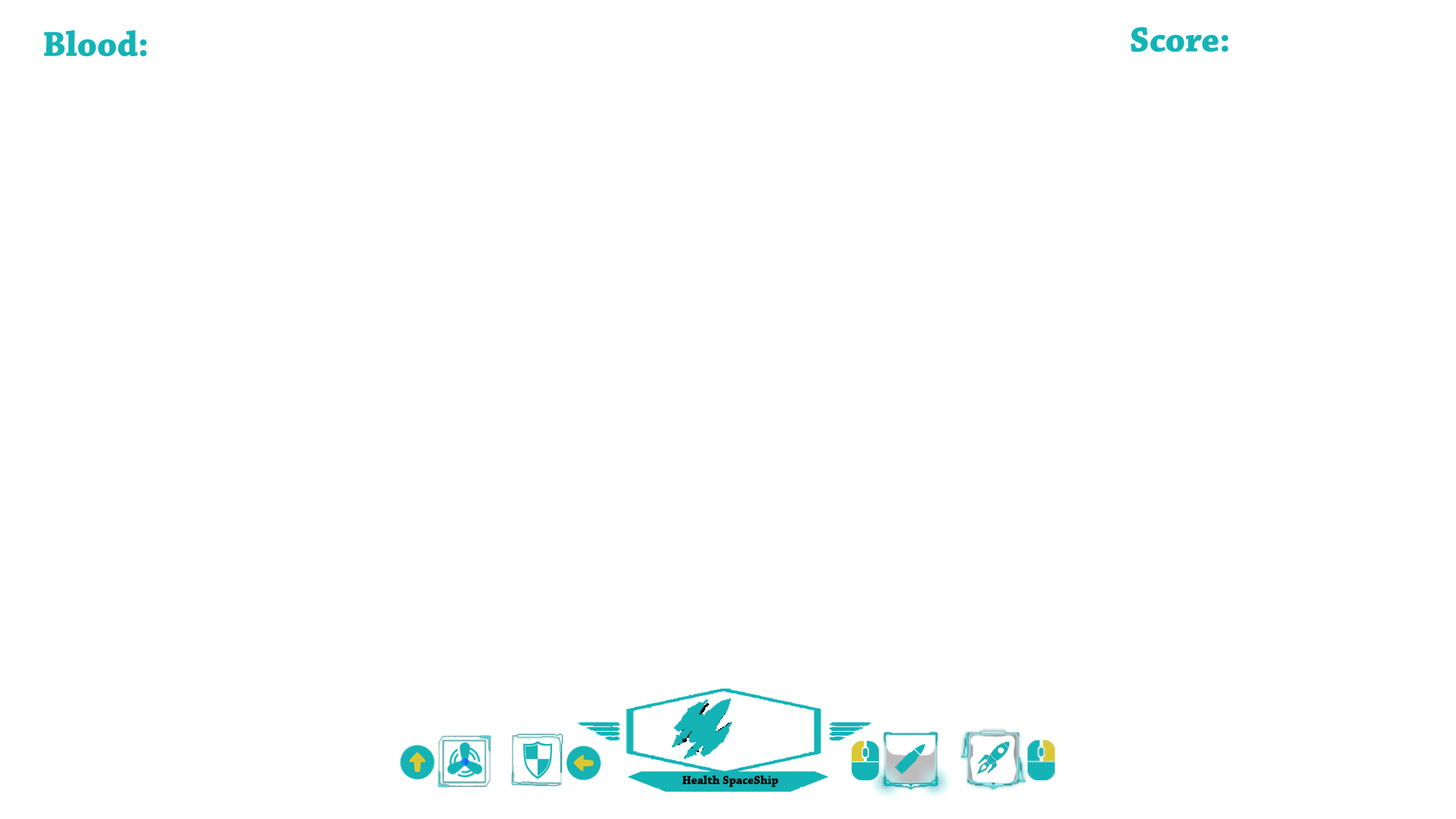
<style>
.page{position:relative;width:1456px;height:819px;background:#ffffff}
.page>*{position:absolute;margin:0}
.t1{font:36.4px "ChaparralPro-Bold";color:#14b3b6}
.t2{font:12.1px "ChaparralPro-Bold";color:#000000}
</style>
<div class="page">
<p class="t1" style="left:44px;top:30px;width:103px;height:27px">Blood:</p>
<p class="t1" style="left:1131px;top:27px;width:97px;height:25px">Score:</p>
<p class="t2" style="left:682px;top:775px;width:97px;height:12px">Health SpaceShip</p>
</div>
